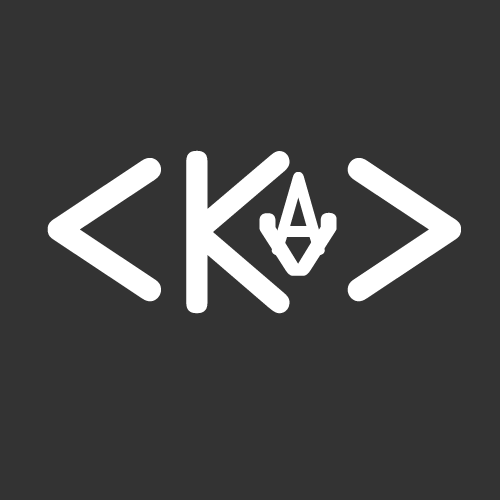
<style>
.page{position:relative;width:500px;height:500px;background:#333333}
.page>*{position:absolute;margin:0}
.t1{font:208.3px "OCRAStd";color:#ffffff}
.t2{font:106.6px "OCRAStd";color:#ffffff}
.t3{font:116px "OCRAStd";color:#ffffff;scale:1.41 1}
</style>
<div class="page">
<p class="t1" style="left:186px;top:150px;width:104px;height:164px">K</p>
<p class="t1" style="left:47px;top:158px;width:414px;height:144px">&lt; &gt;</p>
<p class="t2" style="left:271px;top:172px;width:54px;height:83px">A</p>
<p class="t3" style="left:259px;top:212px;width:78px;height:64px">v</p>
</div>
